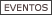
<style>
.page{position:relative;width:52px;height:15px;background:#ffffff}
.page>*{position:absolute;margin:0}
.t1{font:9px "Verdana";color:#554545;font-weight:bold}
</style>
<div class="page">
<p class="t1" style="left:4px;top:4px;width:44px;height:7px">EVENTOS</p>
</div>
